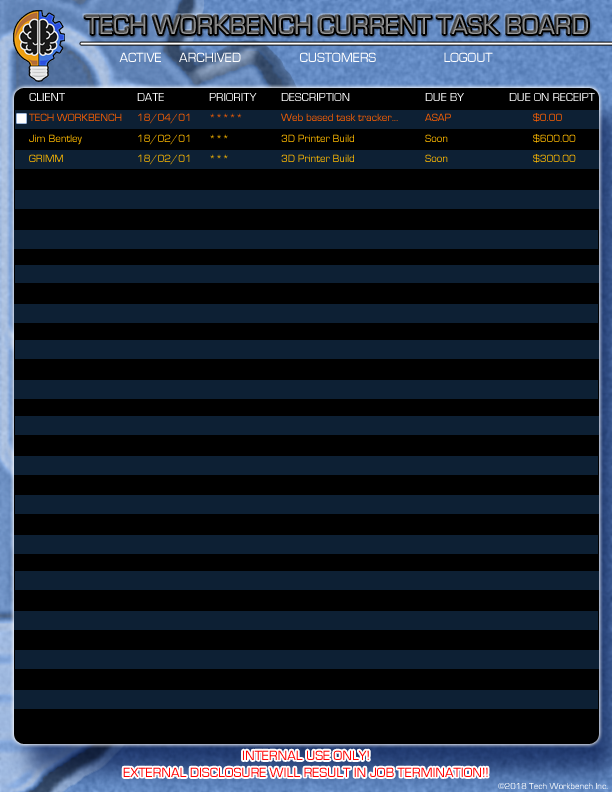
<style>
.page{position:relative;width:612px;height:792px;background:#000000}
.page>*{position:absolute;margin:0}
.t1{font:26.8px "EurostileRegular";color:#8b8b8b}
.t2{font:14px "EurostileRegular";color:#ffffff}
.t3{font:12px "EurostileRegular";color:#ffffff}
.t4{font:11px "EurostileRegular";color:#ff6000}
.t5{font:11px "EurostileRegular"}
.t6{font:14px "EurostileRegular";color:#ff0000}
.t7{font:9px "EurostileRegular";color:#ffffff}
</style>
<div class="page">
<p class="t1" style="left:85px;top:16px;width:503px;height:18px">TECH WORKBENCH CURRENT TASK BOARD</p>
<p class="t2" style="left:119px;top:52px;width:374px;height:10px">ACTIVE     ARCHIVED  CUSTOMERS  LOGOUT</p>
<p class="t3" style="left:29px;top:93px;width:566px;height:8px">CLIENT   DATE   PRIORITY DESCRIPTION          DUE BY      DUE ON RECEIPT</p>
<p class="t4" style="left:29px;top:113px;width:533px;height:11px">TECH WORKBENCH 18/04/01 *****  Web based task tracker...  ASAP   $0.00</p>
<p class="t5" style="left:29px;top:134px;width:547px;height:11px">Jim Bentley  18/02/01 ***  3D Printer Build    Soon   $600.00</p>
<p class="t5" style="left:29px;top:154px;width:547px;height:11px">GRIMM   18/02/01 ***  3D Printer Build   Soon   $300.00</p>
<p class="t6" style="left:123px;top:750px;width:365px;height:27px;text-align:center">INTERNAL USE ONLY!<br>EXTERNAL DISCLOSURE WILL RESULT IN JOB TERMINATION!!</p>
<p class="t7" style="left:498px;top:783px;width:110px;height:6px">©2018 Tech Workbench Inc.</p>
</div>
